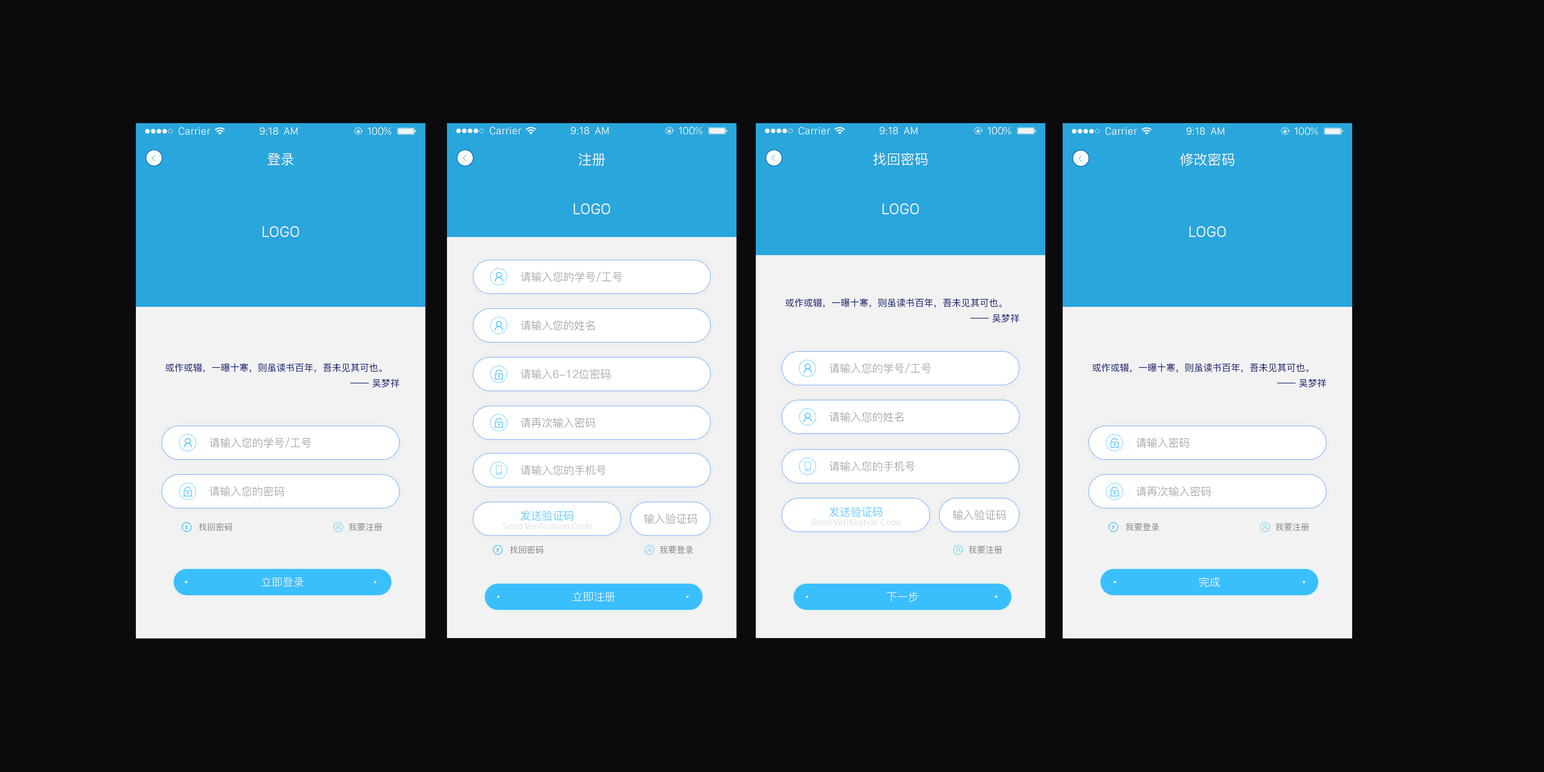
<style>
.page{position:relative;width:1544px;height:772px;background:#0b0b0e}
.page>*{position:absolute;margin:0}
.t1{font:10.8px "SanFranciscoDisplay-Regular";color:#f2f2f2}
.t2{font:10.8px "SanFranciscoDisplay-Regular";letter-spacing:0.02em;color:#f2f2f2;text-transform:uppercase}
.t3{font:10.8px "SanFranciscoDisplay-Regular";color:#f2f2f2;scale:1.05 1}
.t4{font:13.9px "PingFang-SC-Medium";color:#f2f2f2;text-transform:uppercase}
.t5{font:16.2px "SanFranciscoDisplay-Regular";color:#f2f2f2;text-transform:uppercase}
.t6{font:10.8px "PingFang-SC-Regular";color:#999999}
.t7{font:9.3px/15.4px "PingFang-SC-Medium";color:#0a196b;text-transform:uppercase}
.t8{font:10.8px "PingFang-SC-Regular";color:#3abffd}
.t9{font:9.3px "SanFranciscoDisplay-Light";color:#d7d7d7}
.t10{font:8.5px "PingFang-SC-Regular";color:#666666}
.t11{font:10.8px "PingFang-SC-Regular";color:#ffffff;text-transform:uppercase}
</style>
<div class="page">
<p class="t1" style="left:179px;top:127px;width:31px;height:8px">Carrier</p>
<p class="t2" style="left:259px;top:127px;width:39px;height:8px">9:18  AM</p>
<p class="t3" style="left:368px;top:127px;width:23px;height:8px">100%</p>
<p class="t1" style="left:490px;top:127px;width:32px;height:8px">Carrier</p>
<p class="t2" style="left:571px;top:127px;width:38px;height:7px">9:18  AM</p>
<p class="t3" style="left:679px;top:127px;width:24px;height:8px">100%</p>
<p class="t1" style="left:799px;top:127px;width:31px;height:8px">Carrier</p>
<p class="t2" style="left:879px;top:127px;width:39px;height:7px">9:18  AM</p>
<p class="t3" style="left:988px;top:127px;width:24px;height:8px">100%</p>
<p class="t1" style="left:1106px;top:127px;width:31px;height:8px">Carrier</p>
<p class="t2" style="left:1186px;top:127px;width:39px;height:8px">9:18  AM</p>
<p class="t3" style="left:1295px;top:127px;width:23px;height:8px">100%</p>
<p class="t4" style="left:267px;top:153px;width:27px;height:13px">登录</p>
<p class="t4" style="left:579px;top:153px;width:26px;height:13px">注册</p>
<p class="t4" style="left:873px;top:152px;width:55px;height:14px">找回密码</p>
<p class="t4" style="left:1180px;top:153px;width:55px;height:13px">修改密码</p>
<p class="t5" style="left:574px;top:203px;width:36px;height:11px">logo</p>
<p class="t5" style="left:883px;top:203px;width:36px;height:11px">logo</p>
<p class="t5" style="left:263px;top:226px;width:36px;height:11px">logo</p>
<p class="t5" style="left:1189px;top:226px;width:37px;height:11px">logo</p>
<p class="t6" style="left:520px;top:271px;width:102px;height:11px">请输入您的学号/工号</p>
<p class="t7" style="left:786px;top:298px;width:234px;height:25px">或作或辍，一曝十寒，则虽读书百年，吾未见其可也。<br>                                                            —— 吴梦祥</p>
<p class="t6" style="left:520px;top:320px;width:75px;height:10px">请输入您的姓名</p>
<p class="t7" style="left:166px;top:363px;width:234px;height:25px">或作或辍，一曝十寒，则虽读书百年，吾未见其可也。<br>                                                            —— 吴梦祥</p>
<p class="t6" style="left:829px;top:363px;width:102px;height:10px">请输入您的学号/工号</p>
<p class="t7" style="left:1093px;top:363px;width:234px;height:25px">或作或辍，一曝十寒，则虽读书百年，吾未见其可也。<br>                                                            —— 吴梦祥</p>
<p class="t6" style="left:520px;top:369px;width:90px;height:10px">请输入6-12位密码</p>
<p class="t6" style="left:829px;top:412px;width:74px;height:10px">请输入您的姓名</p>
<p class="t6" style="left:520px;top:418px;width:75px;height:10px">请再次输入密码</p>
<p class="t6" style="left:209px;top:437px;width:102px;height:11px">请输入您的学号/工号</p>
<p class="t6" style="left:1136px;top:438px;width:53px;height:10px">请输入密码</p>
<p class="t6" style="left:829px;top:461px;width:86px;height:10px">请输入您的手机号</p>
<p class="t6" style="left:520px;top:465px;width:86px;height:10px">请输入您的手机号</p>
<p class="t6" style="left:209px;top:486px;width:75px;height:10px">请输入您的密码</p>
<p class="t6" style="left:1136px;top:486px;width:75px;height:10px">请再次输入密码</p>
<p class="t8" style="left:829px;top:507px;width:54px;height:10px">发送验证码</p>
<p class="t8" style="left:520px;top:510px;width:54px;height:11px">发送验证码</p>
<p class="t6" style="left:644px;top:514px;width:53px;height:10px">输入验证码</p>
<p class="t9" style="left:812px;top:519px;width:89px;height:6px">Send Verification Code</p>
<p class="t6" style="left:953px;top:510px;width:53px;height:10px">输入验证码</p>
<p class="t10" style="left:199px;top:523px;width:33px;height:8px">找回密码</p>
<p class="t10" style="left:349px;top:523px;width:33px;height:8px">我要注册</p>
<p class="t9" style="left:503px;top:523px;width:89px;height:6px">Send Verification Code</p>
<p class="t10" style="left:1126px;top:523px;width:33px;height:8px">我要登录</p>
<p class="t10" style="left:1276px;top:523px;width:33px;height:8px">我要注册</p>
<p class="t10" style="left:510px;top:546px;width:34px;height:8px">找回密码</p>
<p class="t10" style="left:660px;top:546px;width:33px;height:8px">我要登录</p>
<p class="t10" style="left:969px;top:546px;width:33px;height:8px">我要注册</p>
<p class="t11" style="left:261px;top:577px;width:43px;height:10px">立即登录</p>
<p class="t11" style="left:1199px;top:577px;width:21px;height:10px">完成</p>
<p class="t11" style="left:573px;top:592px;width:42px;height:10px">立即注册</p>
<p class="t11" style="left:887px;top:592px;width:31px;height:10px">下一步</p>
</div>
